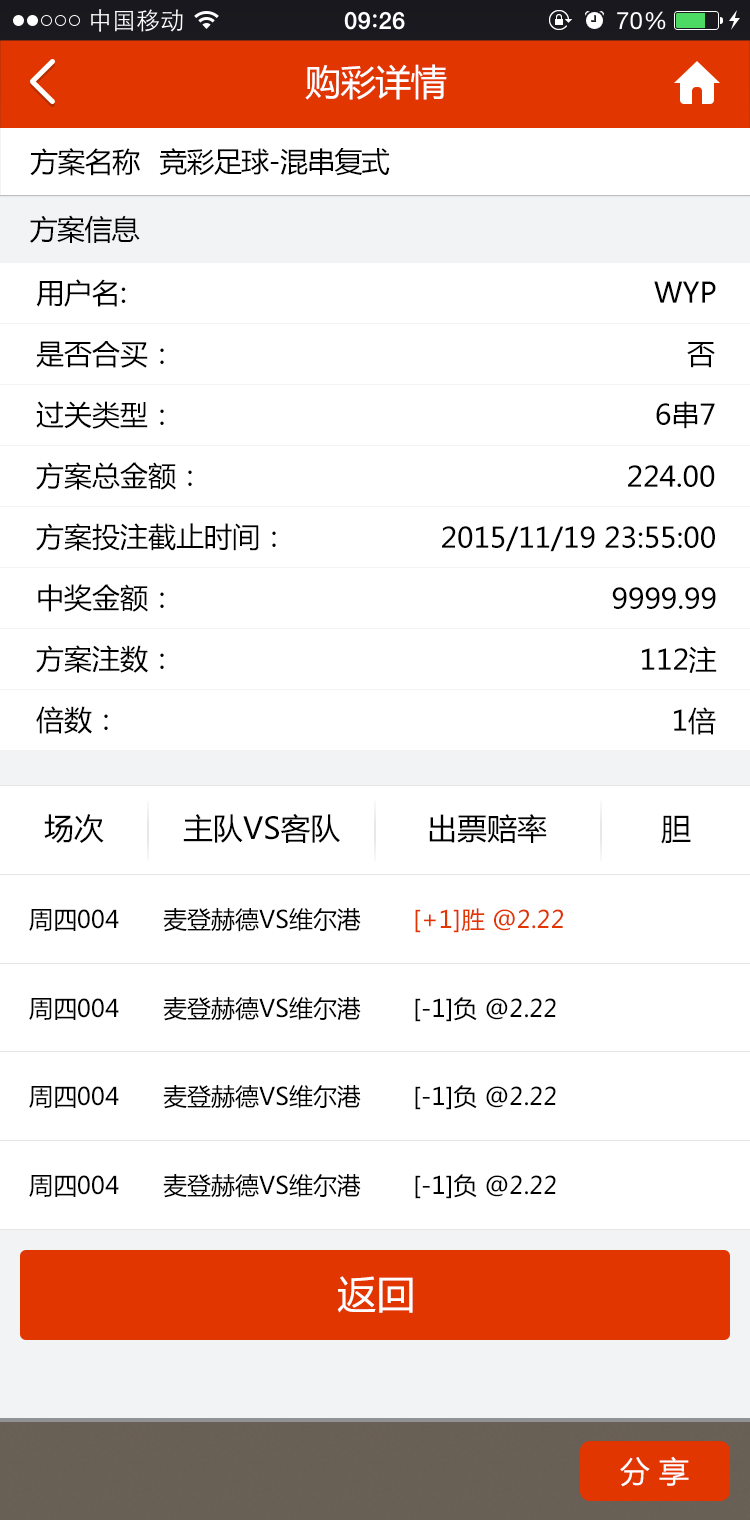
<style>
.page{position:relative;width:750px;height:1520px;background:#ffffff}
.page>*{position:absolute;margin:0}
.t1{font:36px "MicrosoftYaHei";letter-spacing:-0.025em;color:#ffffff}
.t2{font:28px "MicrosoftYaHei";letter-spacing:-0.025em;color:#000000}
.t3{font:28px "MicrosoftYaHei";color:#000000}
.t4{font:30px "MicrosoftYaHei";color:#000000}
.t5{font:24px "MicrosoftYaHei";color:#000000}
.t6{font:24px "MicrosoftYaHei";color:#e23600}
.t7{font:39px "MicrosoftYaHei";color:#ffffff}
.t8{font:30px "MicrosoftYaHei";color:#ffffff}
</style>
<div class="page">
<p class="t1" style="left:305px;top:64px;width:142px;height:36px">购彩详情</p>
<p class="t2" style="left:30px;top:148px;width:110px;height:28px">方案名称</p>
<p class="t2" style="left:159px;top:148px;width:231px;height:28px">竞彩足球-混串复式</p>
<p class="t2" style="left:30px;top:215px;width:110px;height:28px">方案信息</p>
<p class="t3" style="left:36px;top:279px;width:90px;height:28px">用户名:</p>
<p class="t3" style="left:654px;top:281px;width:62px;height:22px">WYP</p>
<p class="t3" style="left:36px;top:341px;width:128px;height:27px">是否合买：</p>
<p class="t3" style="left:687px;top:342px;width:28px;height:26px">否</p>
<p class="t3" style="left:36px;top:401px;width:128px;height:28px">过关类型：</p>
<p class="t3" style="left:656px;top:401px;width:59px;height:28px">6串7</p>
<p class="t3" style="left:36px;top:462px;width:156px;height:28px">方案总金额：</p>
<p class="t3" style="left:628px;top:465px;width:87px;height:22px">224.00</p>
<p class="t3" style="left:36px;top:523px;width:240px;height:28px">方案投注截止时间：</p>
<p class="t3" style="left:442px;top:526px;width:273px;height:26px">2015/11/19 23:55:00</p>
<p class="t3" style="left:38px;top:584px;width:126px;height:28px">中奖金额：</p>
<p class="t3" style="left:612px;top:587px;width:104px;height:22px">9999.99</p>
<p class="t3" style="left:36px;top:645px;width:128px;height:28px">方案注数：</p>
<p class="t3" style="left:642px;top:646px;width:75px;height:28px">112注</p>
<p class="t3" style="left:36px;top:706px;width:72px;height:28px">倍数：</p>
<p class="t3" style="left:674px;top:707px;width:42px;height:28px">1倍</p>
<p class="t4" style="left:44px;top:814px;width:60px;height:29px">场次</p>
<p class="t4" style="left:183px;top:813px;width:157px;height:30px">主队VS客队</p>
<p class="t4" style="left:429px;top:814px;width:118px;height:29px">出票赔率</p>
<p class="t4" style="left:661px;top:815px;width:30px;height:29px">胆</p>
<p class="t5" style="left:29px;top:909px;width:90px;height:22px">周四004</p>
<p class="t5" style="left:163px;top:908px;width:198px;height:24px">麦登赫德VS维尔港</p>
<p class="t6" style="left:415px;top:908px;width:148px;height:25px">[+1]胜 @2.22</p>
<p class="t5" style="left:29px;top:998px;width:90px;height:22px">周四004</p>
<p class="t5" style="left:163px;top:997px;width:198px;height:24px">麦登赫德VS维尔港</p>
<p class="t5" style="left:415px;top:997px;width:141px;height:25px">[-1]负 @2.22</p>
<p class="t5" style="left:29px;top:1086px;width:90px;height:22px">周四004</p>
<p class="t5" style="left:163px;top:1085px;width:198px;height:24px">麦登赫德VS维尔港</p>
<p class="t5" style="left:415px;top:1085px;width:141px;height:25px">[-1]负 @2.22</p>
<p class="t5" style="left:29px;top:1175px;width:90px;height:22px">周四004</p>
<p class="t5" style="left:163px;top:1174px;width:198px;height:24px">麦登赫德VS维尔港</p>
<p class="t5" style="left:415px;top:1174px;width:141px;height:25px">[-1]负 @2.22</p>
<p class="t7" style="left:337px;top:1276px;width:76px;height:37px">返回</p>
<p class="t8" style="left:620px;top:1456px;width:69px;height:31px">分 享</p>
</div>
